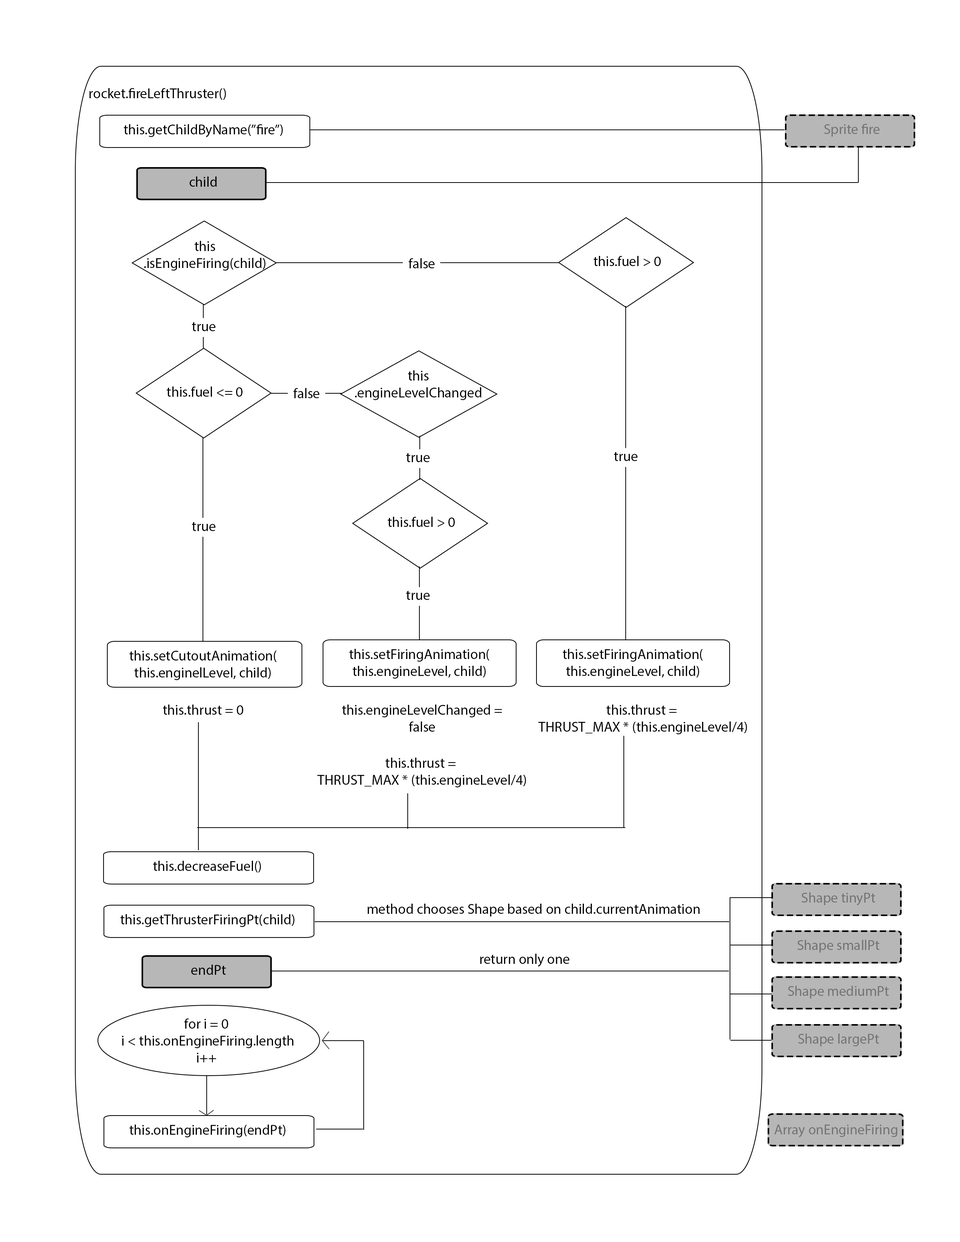
<style>
.page{position:relative;width:960px;height:1242px;background:#ffffff}
.page>*{position:absolute;margin:0}
.t1{font:14.1px "MyriadPro-Regular";color:#000000}
.t2{font:14.1px "MyriadPro-Regular";color:#737373}
</style>
<div class="page">
<p class="t1" style="left:89px;top:88px;width:137px;height:12px">rocket.fireLeftThruster()</p>
<p class="t1" style="left:124px;top:124px;width:159px;height:13px">this.getChildByName(”fire”)</p>
<p class="t2" style="left:824px;top:124px;width:56px;height:13px">Sprite fire</p>
<p class="t1" style="left:189px;top:177px;width:28px;height:10px">child</p>
<p class="t1" style="left:144px;top:241px;width:121px;height:30px;text-align:center">this<br>.isEngineFiring(child)</p>
<p class="t1" style="left:594px;top:256px;width:67px;height:10px">this.fuel &gt; 0</p>
<p class="t1" style="left:408px;top:258px;width:27px;height:10px">false</p>
<p class="t1" style="left:192px;top:322px;width:24px;height:9px">true</p>
<p class="t1" style="left:355px;top:370px;width:126px;height:30px;text-align:center">this<br>.engineLevelChanged</p>
<p class="t1" style="left:167px;top:387px;width:75px;height:10px">this.fuel &lt;= 0</p>
<p class="t1" style="left:293px;top:388px;width:27px;height:10px">false</p>
<p class="t1" style="left:406px;top:453px;width:24px;height:9px">true</p>
<p class="t1" style="left:614px;top:452px;width:24px;height:9px">true</p>
<p class="t1" style="left:192px;top:522px;width:24px;height:9px">true</p>
<p class="t1" style="left:388px;top:517px;width:67px;height:10px">this.fuel &gt; 0</p>
<p class="t1" style="left:406px;top:591px;width:24px;height:9px">true</p>
<p class="t1" style="left:129px;top:650px;width:148px;height:30px;text-align:center">this.setCutoutAnimation(<br>this.enginelLevel, child)</p>
<p class="t1" style="left:349px;top:649px;width:140px;height:30px;text-align:center">this.setFiringAnimation(<br>this.engineLevel, child)</p>
<p class="t1" style="left:563px;top:649px;width:140px;height:30px;text-align:center">this.setFiringAnimation(<br>this.engineLevel, child)</p>
<p class="t1" style="left:163px;top:705px;width:80px;height:10px">this.thrust = 0</p>
<p class="t1" style="left:342px;top:705px;width:160px;height:27px;text-align:center">this.engineLevelChanged =<br>false</p>
<p class="t1" style="left:538px;top:705px;width:209px;height:29px;text-align:center">this.thrust = <br>THRUST_MAX * (this.engineLevel/4)</p>
<p class="t1" style="left:317px;top:758px;width:209px;height:30px;text-align:center">this.thrust = <br>THRUST_MAX * (this.engineLevel/4)</p>
<p class="t1" style="left:153px;top:861px;width:108px;height:12px">this.decreaseFuel()</p>
<p class="t2" style="left:801px;top:893px;width:74px;height:13px">Shape tinyPt</p>
<p class="t1" style="left:367px;top:904px;width:333px;height:13px">method chooses Shape based on child.currentAnimation</p>
<p class="t1" style="left:120px;top:914px;width:174px;height:13px">this.getThrusterFiringPt(child)</p>
<p class="t2" style="left:797px;top:940px;width:82px;height:13px">Shape smallPt</p>
<p class="t1" style="left:480px;top:954px;width:90px;height:13px">return only one</p>
<p class="t1" style="left:191px;top:965px;width:35px;height:10px">endPt</p>
<p class="t2" style="left:788px;top:986px;width:101px;height:13px">Shape mediumPt</p>
<p class="t1" style="left:122px;top:1019px;width:172px;height:44px;text-align:center">for i = 0<br> i &lt; this.onEngineFiring.length<br>i++</p>
<p class="t2" style="left:798px;top:1034px;width:81px;height:12px">Shape largePt</p>
<p class="t1" style="left:129px;top:1125px;width:156px;height:13px">this.onEngineFiring(endPt)</p>
<p class="t2" style="left:774px;top:1125px;width:123px;height:13px">Array onEngineFiring</p>
</div>
